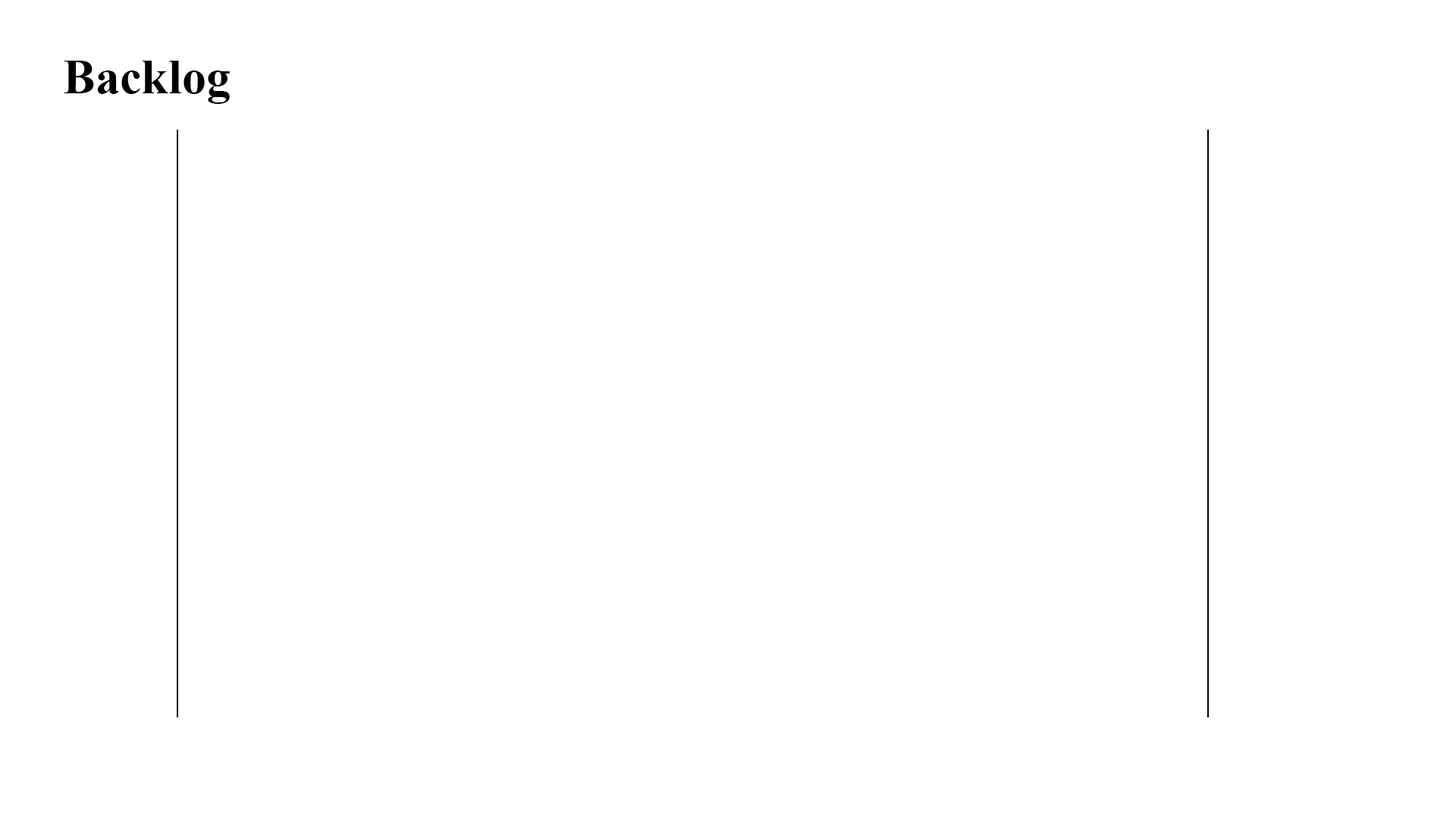
<style>
.page{position:relative;width:1456px;height:819px;background:#ffffff}
.page>*{position:absolute;margin:0}
.t1{font:48.5px "TimesNewRomanPS-BoldMT";color:#000000}
</style>
<div class="page">
<p class="t1" style="left:64px;top:61px;width:166px;height:43px">Backlog</p>
</div>
